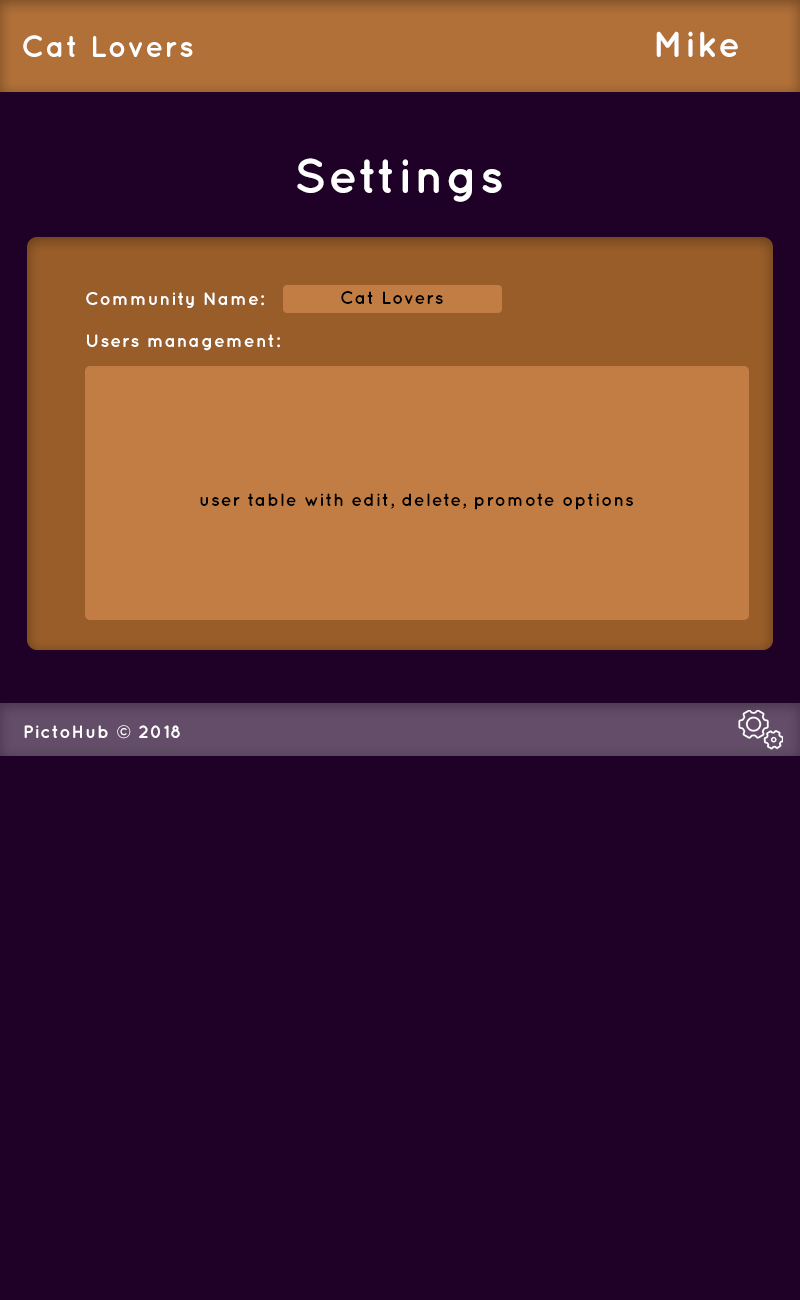
<style>
.page{position:relative;width:800px;height:1300px;background:#1f0026}
.page>*{position:absolute;margin:0}
.t1{font:30px "Quicksand-Bold";letter-spacing:0.05em;color:#ffffff}
.t2{font:36px "Quicksand-Bold";letter-spacing:0.05em;color:#ffffff}
.t3{font:48px "Quicksand-Bold";letter-spacing:0.05em;color:#ffffff}
.t4{font:18px/14px "Quicksand-Bold";letter-spacing:0.05em;color:#ffffff}
.t5{font:18px "Quicksand-Bold";letter-spacing:0.05em;color:#010000}
.t6{font:18px "Quicksand-Bold";letter-spacing:0.05em;color:#000000}
.t7{font:18px "Quicksand-Bold";letter-spacing:0.05em;color:#ffffff}
</style>
<div class="page">
<p class="t1" style="left:23px;top:35px;width:170px;height:22px">Cat Lovers</p>
<p class="t2" style="left:656px;top:31px;width:82px;height:26px">Mike</p>
<p class="t3" style="left:297px;top:158px;width:205px;height:44px">Settings</p>
<p class="t4" style="left:86px;top:292px;width:194px;height:59px">Community Name:<br><br><br>Users management:</p>
<p class="t5" style="left:341px;top:291px;width:102px;height:13px">Cat Lovers</p>
<p class="t6" style="left:200px;top:493px;width:433px;height:17px">user table with edit, delete, promote options</p>
<p class="t7" style="left:24px;top:725px;width:156px;height:14px">PictoHub © 2018</p>
</div>
